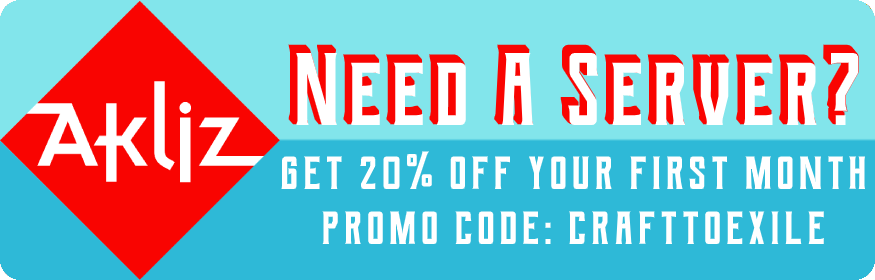
<style>
.page{position:relative;width:875px;height:280px;background:#2eb9d7}
.page>*{position:absolute;margin:0}
.t1{font:88px "BergExtrude"}
.t2{font:88px "BergRegular";color:#ffffff}
.t3{font:46px "BergRegular";color:#ffffff}
</style>
<div class="page">
<p class="t1" style="left:288px;top:44px;width:571px;height:81px">Need A Server?</p>
<p class="t2" style="left:296px;top:53px;width:563px;height:72px">Need A Server?</p>
<p class="t3" style="left:281px;top:151px;width:585px;height:93px;text-align:center">get 20% off your first month<br>promo code: crafttoexile</p>
</div>
